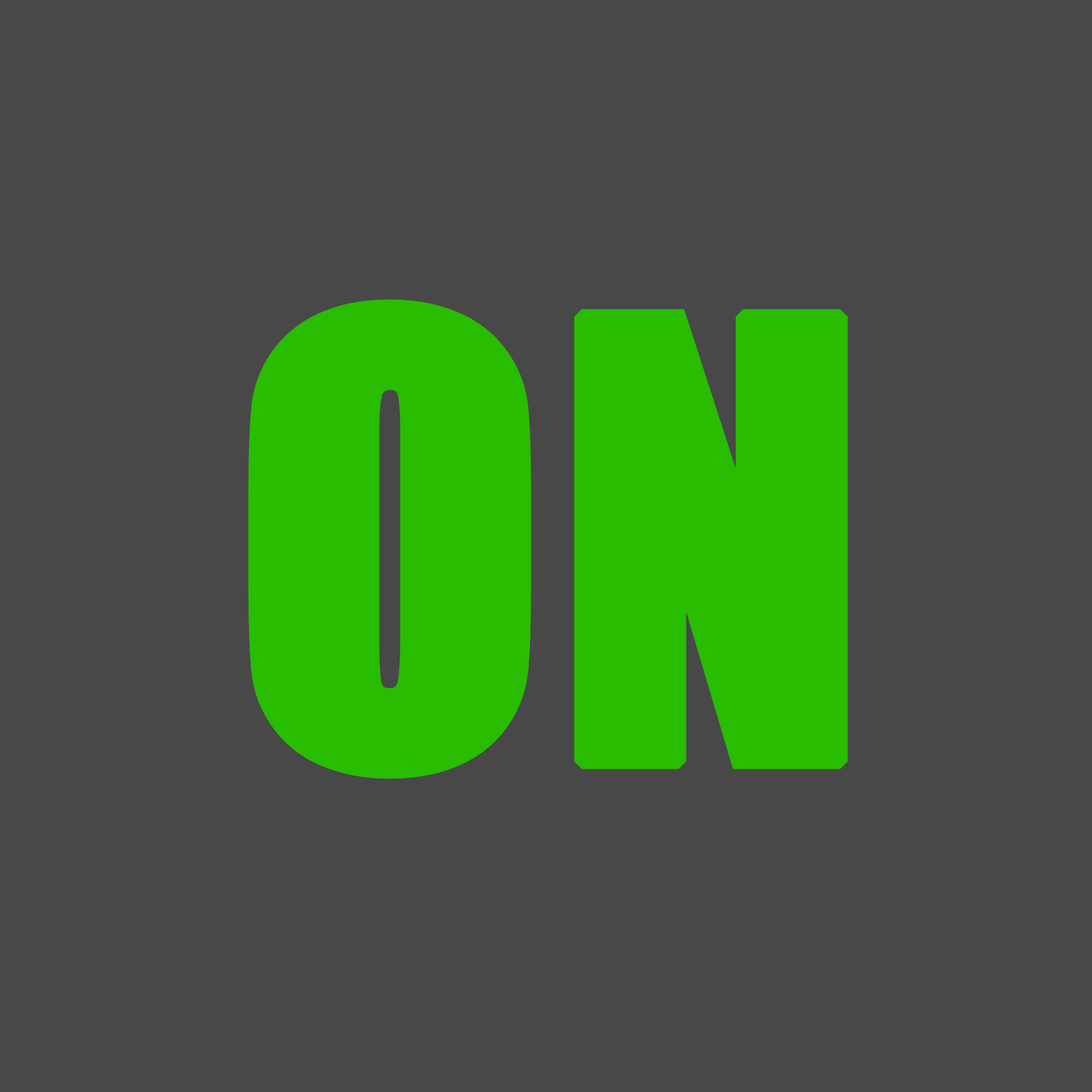
<style>
.page{position:relative;width:1092px;height:1092px;background:#484848}
.page>*{position:absolute;margin:0}
.t1{font:562.5px "Impact";color:#28bd00;font-weight:bold}
</style>
<div class="page">
<p class="t1" style="left:248px;top:299px;width:600px;height:480px">ON</p>
</div>
